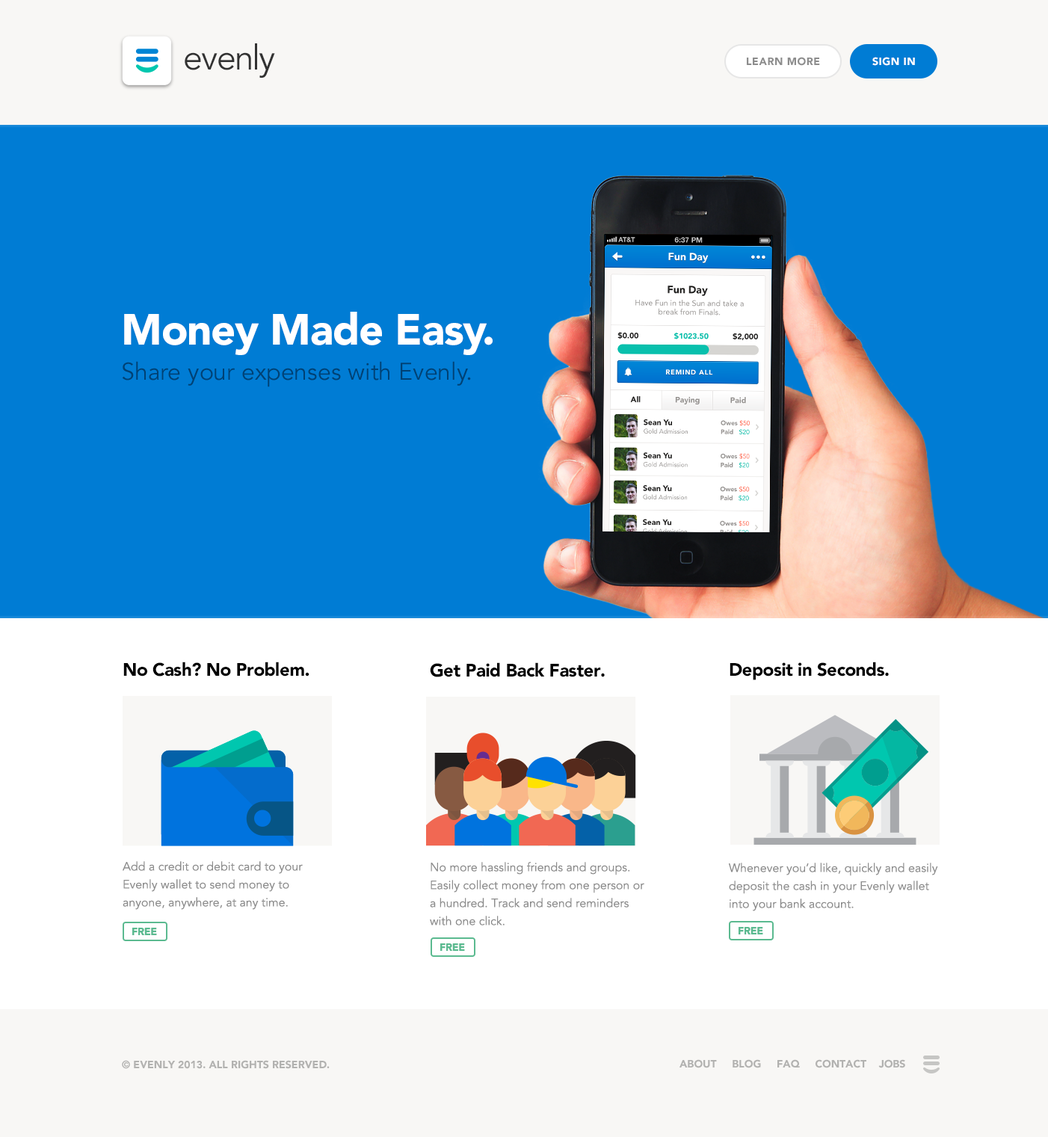
<style>
.page{position:relative;width:1048px;height:1137px;background:#007cd4}
.page>*{position:absolute;margin:0}
.t1{font:34.7px "Avenir-Book";letter-spacing:-0.04em;color:#323232}
.t2{font:10.5px "Avenir-Black";letter-spacing:0.04em;color:#8d8d8d;text-transform:uppercase}
.t3{font:10.5px "Avenir-Black";letter-spacing:0.04em;color:#ffffff;text-transform:uppercase}
.t4{font:43.4px "Avenir-Black";letter-spacing:-0.02em;color:#ffffff}
.t5{font:23.9px "Avenir-Book";color:#004174}
.t6{font:17.9px "Avenir-Black";letter-spacing:-0.02em;color:#000000}
.t7{font:12px/17.9px "Avenir-Book";color:#8c8c8c}
.t8{font:10.5px "Avenir-Black";letter-spacing:-0.02em;color:#5bba90;text-transform:uppercase}
.t9{font:10.5px "Avenir-Black";color:#b2b2b0;text-transform:uppercase}
</style>
<div class="page">
<p class="t1" style="left:185px;top:43px;width:90px;height:35px">evenly</p>
<p class="t2" style="left:747px;top:57px;width:73px;height:9px">Learn More</p>
<p class="t3" style="left:873px;top:57px;width:42px;height:9px">Sign in</p>
<p class="t4" style="left:124px;top:312px;width:369px;height:43px">Money Made Easy.</p>
<p class="t5" style="left:122px;top:361px;width:349px;height:26px">Share your expenses with Evenly.</p>
<p class="t6" style="left:123px;top:662px;width:187px;height:15px">No Cash? No Problem.</p>
<p class="t6" style="left:430px;top:663px;width:175px;height:14px">Get Paid Back Faster.</p>
<p class="t6" style="left:730px;top:662px;width:159px;height:18px">Deposit in Seconds.</p>
<p class="t7" style="left:123px;top:861px;width:180px;height:49px">Add a credit or debit card to your Evenly wallet to send money to anyone, anywhere, at any time.</p>
<p class="t7" style="left:430px;top:862px;width:215px;height:64px">No more hassling friends and groups. Easily collect money from one person or a hundred. Track and send reminders with one click.</p>
<p class="t7" style="left:729px;top:863px;width:209px;height:49px">Whenever you’d like, quickly and easily deposit the cash in your Evenly wallet into your bank account.</p>
<p class="t8" style="left:132px;top:928px;width:25px;height:7px">Free</p>
<p class="t8" style="left:739px;top:927px;width:24px;height:8px">Free</p>
<p class="t8" style="left:440px;top:944px;width:25px;height:7px">Free</p>
<p class="t9" style="left:122px;top:1060px;width:208px;height:9px">© EVENLY 2013. All rights reserved.</p>
<p class="t9" style="left:680px;top:1060px;width:226px;height:9px">ABOUT     Blog     FAQ     Contact    Jobs</p>
</div>
